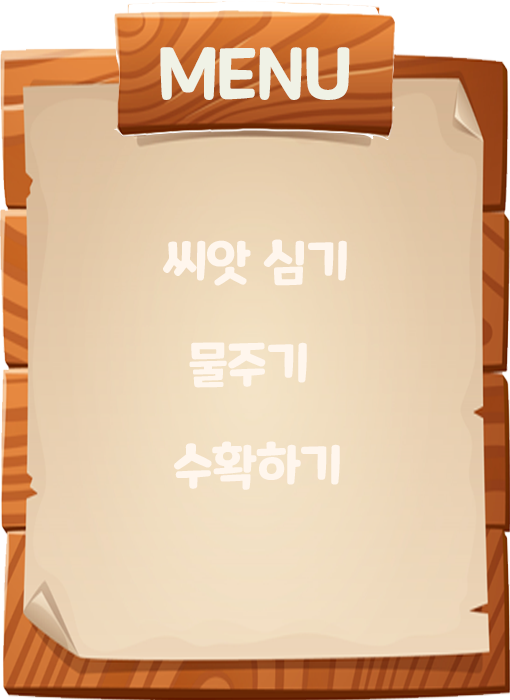
<style>
.page{position:relative;width:510px;height:700px}
.page>*{position:absolute;margin:0}
.t1{font:70px "MaplestoryBold";color:#f0f2e6}
.t2{font:50px "MaplestoryBold";color:#fff6ed}
</style>
<div class="page">
<p class="t1" style="left:160px;top:47px;width:190px;height:53px">MENU</p>
<p class="t2" style="left:163px;top:239px;width:184px;height:47px">씨앗 심기</p>
<p class="t2" style="left:189px;top:342px;width:118px;height:46px">물주기</p>
<p class="t2" style="left:174px;top:441px;width:166px;height:49px">수확하기</p>
</div>
